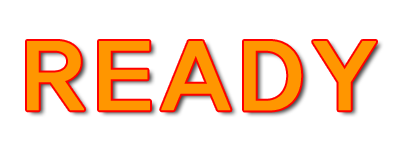
<style>
.page{position:relative;width:400px;height:150px;background:#ffffff}
.page>*{position:absolute;margin:0}
.t1{font:100px "HaanYGodic23";color:#ff9600;font-weight:bold}
</style>
<div class="page">
<p class="t1" style="left:27px;top:41px;width:349px;height:70px">READY</p>
</div>
